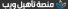
<style>
.page{position:relative;width:68px;height:9px;background:#333333}
.page>*{position:absolute;margin:0}
.t1{font:9px "STV";color:#fefefe}
</style>
<div class="page">
<p class="t1" style="left:2px;top:0px;width:52px;height:9px">منصة تأهيل ويب</p>
</div>
